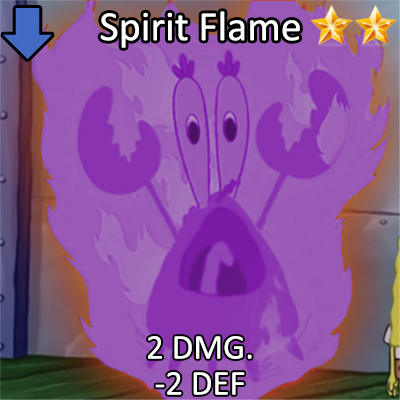
<style>
.page{position:relative;width:400px;height:400px}
.page>*{position:absolute;margin:0}
.t1{font:72px "Calibri";color:#ffffff}
.t2{font:60px/36px "Calibri";color:#ffffff}
</style>
<div class="page">
<p class="t1" style="left:100px;top:11px;width:200px;height:37px">Spirit Flame</p>
<p class="t2" style="left:148px;top:336px;width:104px;height:59px;text-align:center">2 DMG.<br>-2 DEF</p>
</div>
